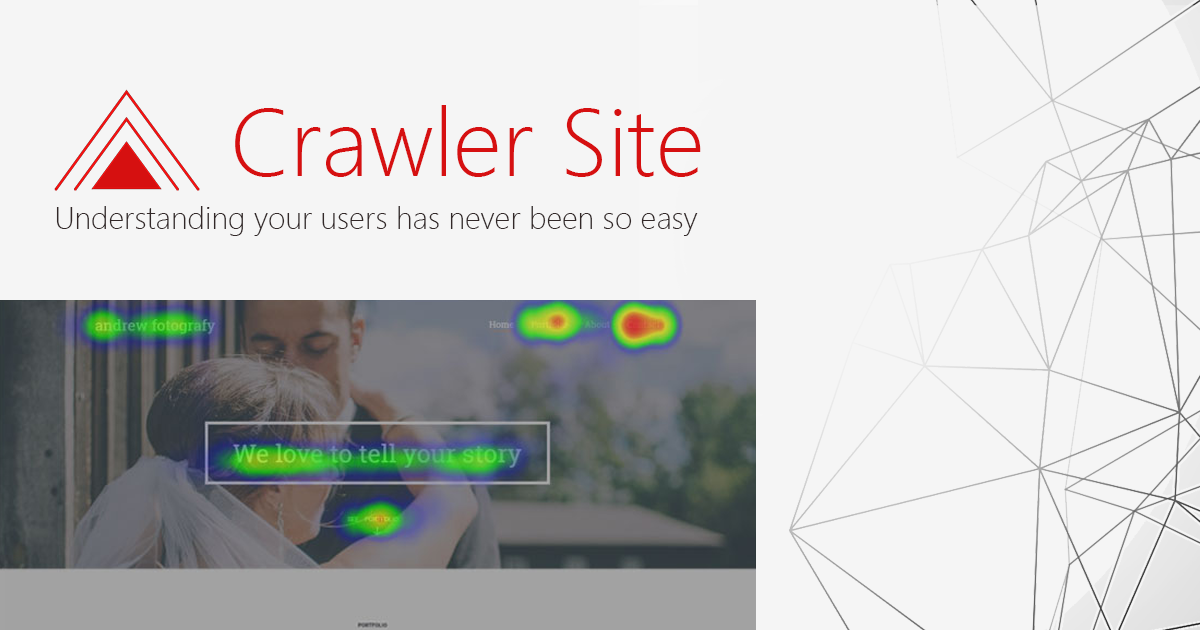
<style>
.page{position:relative;width:1200px;height:630px;background:#f5f5f5}
.page>*{position:absolute;margin:0}
.t1{font:96px "SegoeUI-Light";color:#d61011}
.t2{font:31px "SegoeUI-Light";color:#322828}
</style>
<div class="page">
<p class="t1" style="left:235px;top:105px;width:466px;height:72px">Crawler Site</p>
<p class="t2" style="left:56px;top:206px;width:642px;height:30px">Understanding your users has never been so easy</p>
</div>
